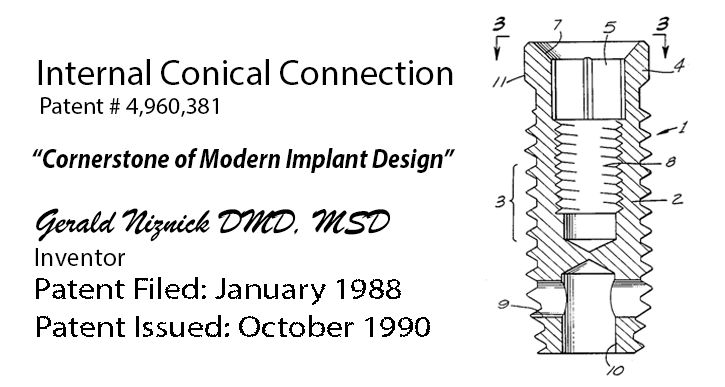
<style>
.page{position:relative;width:725px;height:387px;background:#ffffff}
.page>*{position:absolute;margin:0}
.t1{font:36.2px "MyriadPro-Regular";color:#000000}
.t2{font:24px "MyriadPro-Regular";color:#000000}
.t3{font:27.4px "MyriadPro-BoldIt";color:#000000;scale:0.88 1}
.t4{font:36px "BrushScriptMT";color:#000000}
.t5{font:26px "MyriadPro-Regular";color:#000000}
.t6{font:30px "MyriadPro-Regular";color:#000000;scale:1.14 1}
</style>
<div class="page">
<p class="t1" style="left:38px;top:59px;width:415px;height:26px">Internal Conical Connection</p>
<p class="t2" style="left:41px;top:97px;width:177px;height:20px">Patent # 4,960,381</p>
<p class="t3" style="left:32px;top:148px;width:423px;height:25px">“Cornerstone of Modern Implant Design”</p>
<p class="t4" style="left:36px;top:208px;width:355px;height:34px">Gerald Niznick DMD, MSD</p>
<p class="t5" style="left:35px;top:248px;width:90px;height:18px">Inventor</p>
<p class="t6" style="left:36px;top:277px;width:365px;height:29px">Patent Filed: January 1988</p>
<p class="t6" style="left:37px;top:315px;width:393px;height:22px">Patent Issued: October 1990</p>
</div>
